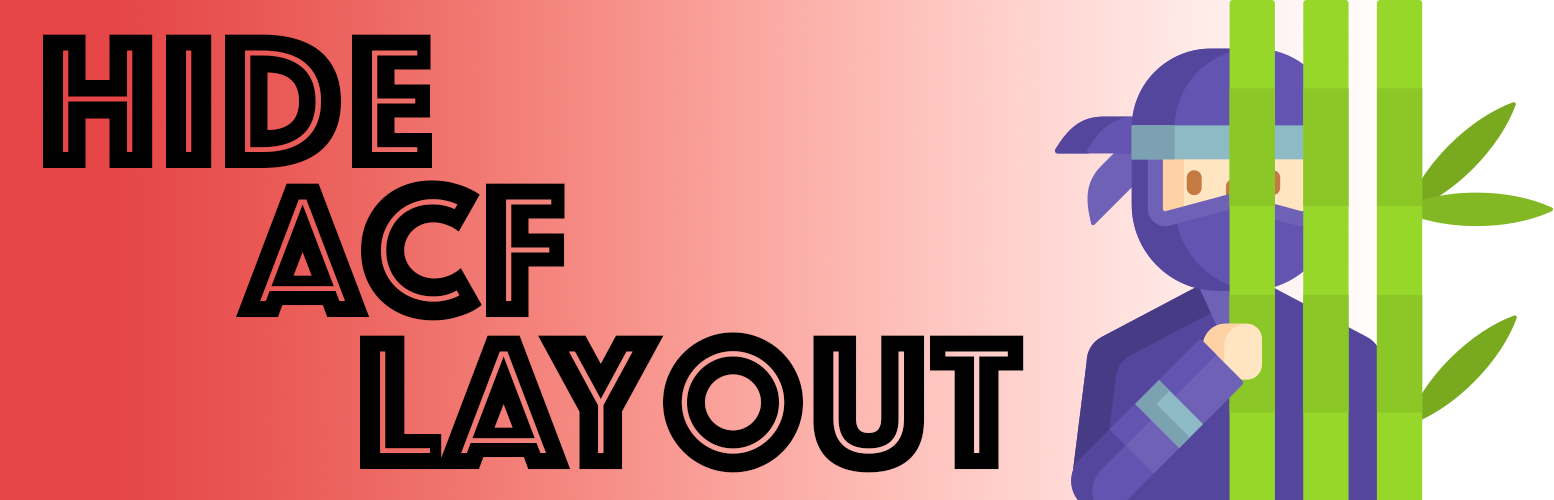
<style>
.page{position:relative;width:1554px;height:500px}
.page>*{position:absolute;margin:0}
.t1{font:200px "Phosphate-Inline";color:#010101}
.t2{font:200px "Phosphate-Inline";color:#000000}
</style>
<div class="page">
<p class="t1" style="left:43px;top:34px;width:389px;height:134px">Hide</p>
<p class="t2" style="left:236px;top:180px;width:329px;height:141px">ACF</p>
<p class="t2" style="left:360px;top:332px;width:664px;height:141px">Layout</p>
</div>
